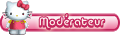
<style>
.page{position:relative;width:120px;height:35px;background:#ffffff}
.page>*{position:absolute;margin:0}
.t1{font:12px "AlbaSuper";color:#c3255c}
</style>
<div class="page">
<p class="t1" style="left:38px;top:13px;width:68px;height:18px">Modérateur</p>
</div>
